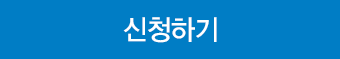
<style>
.page{position:relative;width:340px;height:59px;background:#007dc5}
.page>*{position:absolute;margin:0}
.t1{font:28px "YDVYGO33";letter-spacing:-0.025em;color:#ffffff;scale:0.95 1}
</style>
<div class="page">
<p class="t1" style="left:123px;top:17px;width:94px;height:26px">신청하기</p>
</div>
